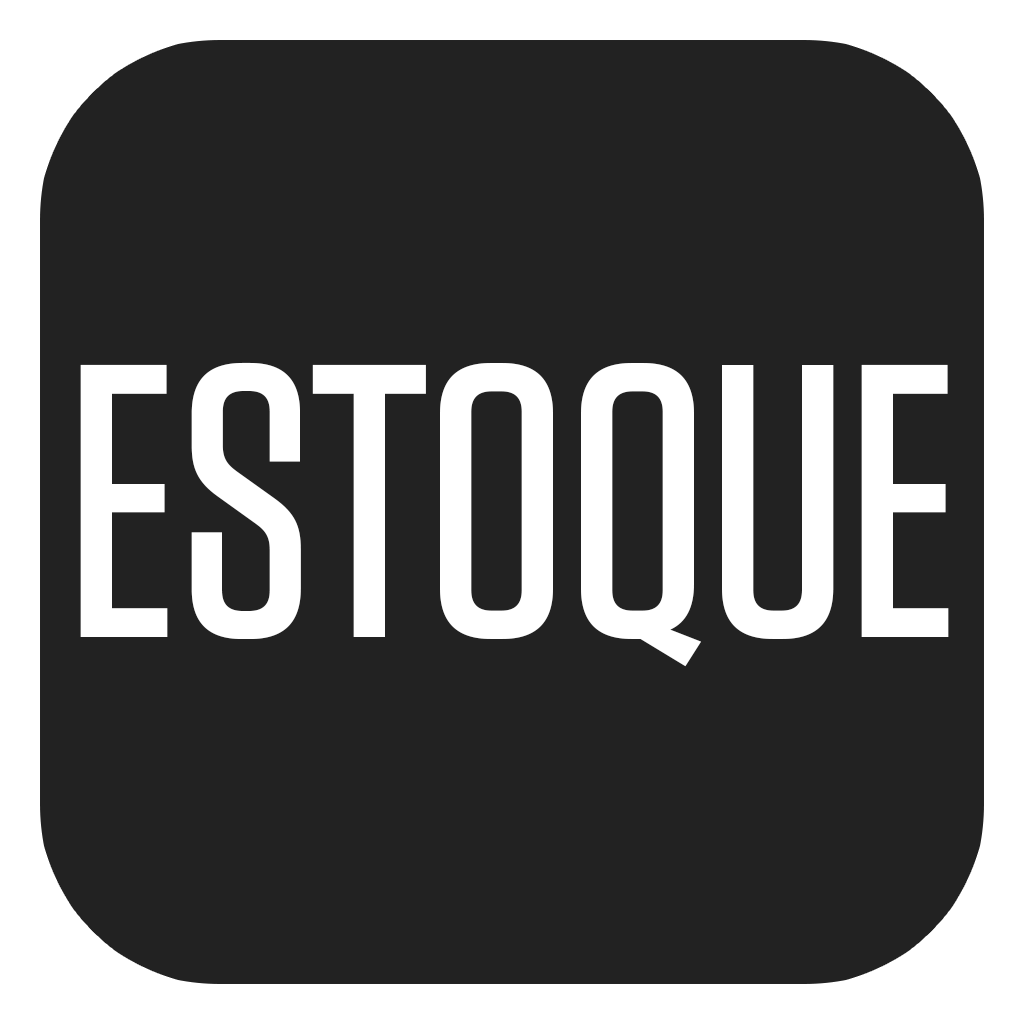
<style>
.page{position:relative;width:1024px;height:1024px;background:#222222}
.page>*{position:absolute;margin:0}
.t1{font:388.1px "Tungsten-Medium";color:#ffffff;text-transform:uppercase}
</style>
<div class="page">
<p class="t1" style="left:80px;top:362px;width:869px;height:305px">Estoque</p>
</div>
